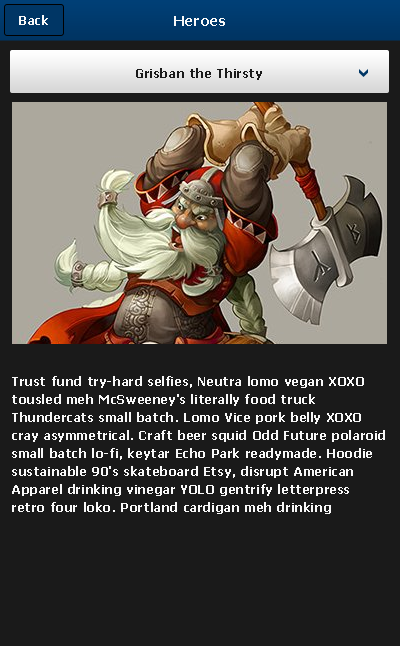
<style>
.page{position:relative;width:400px;height:646px;background:#1a1a1a}
.page>*{position:absolute;margin:0}
.t1{font:12px "Tahoma-Bold";letter-spacing:0.05em;color:#f9f9f9}
.t2{font:14px "Tahoma-Bold";letter-spacing:0.05em;color:#f9f9f9}
.t3{font:12px "Tahoma-Bold";letter-spacing:0.05em;color:#1a1a1a}
.t4{font:12px/18px "Tahoma-Bold";letter-spacing:0.05em;color:#f8f8f8}
</style>
<div class="page">
<p class="t1" style="left:19px;top:15px;width:29px;height:10px">Back</p>
<p class="t2" style="left:174px;top:16px;width:51px;height:10px">Heroes</p>
<p class="t3" style="left:136px;top:68px;width:126px;height:12px">Grisban the Thirsty</p>
<p class="t4" style="left:12px;top:376px;width:373px;height:138px">Trust fund try-hard selfies, Neutra lomo vegan XOXO tousled meh McSweeney's literally food truck Thundercats small batch. Lomo Vice pork belly XOXO cray asymmetrical. Craft beer squid Odd Future polaroid small batch lo-fi, keytar Echo Park readymade. Hoodie sustainable 90's skateboard Etsy, disrupt American Apparel drinking vinegar YOLO gentrify letterpress retro four loko. Portland cardigan meh drinking vinegar. Whatever mlkshk bespoke, Tumblr gastropub authentic typewriter kogi butcher pug Marfa kale chips Portland gentrify 3 wolf moon. Drinking vinegar meggings post-ironic actually, Odd Future hashtag Austin wolf organic aesthetic fashion axe.</p>
</div>
